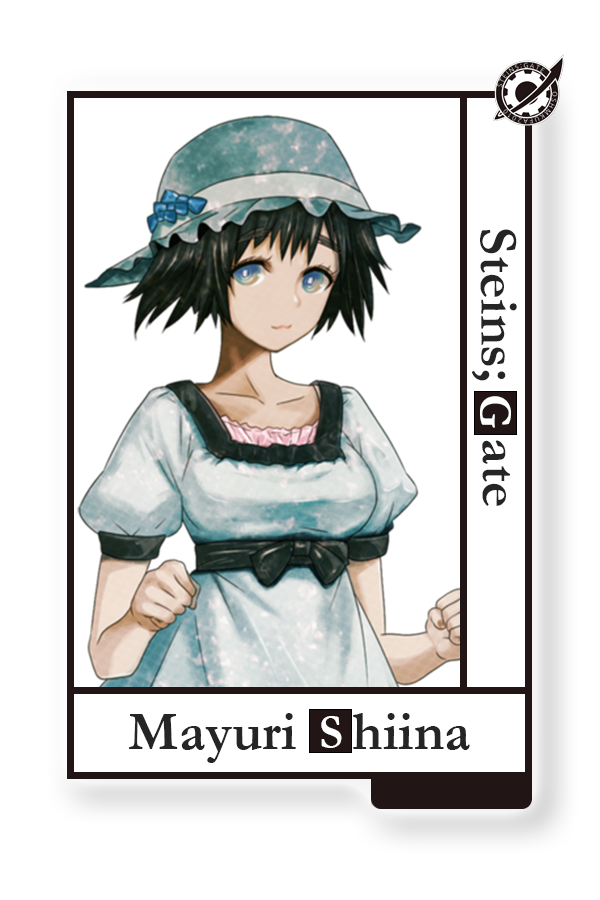
<style>
.page{position:relative;width:600px;height:900px;background:#ffffff}
.page>*{position:absolute;margin:0}
.t1{font:55.4px "Garamond-Bold";color:#252525}
.t2{font:47px "Garamond-Bold";color:#ffffff}
</style>
<div class="page">
<p class="t1" style="left:472px;top:229px;width:45px;height:277px;rotate:89deg">Steins;    ate</p>
<p class="t2" style="left:480px;top:396px;width:31px;height:32px;rotate:90deg">G</p>
<p class="t1" style="left:129px;top:713px;width:341px;height:50px">Mayuri    hiina</p>
<p class="t2" style="left:321px;top:716px;width:21px;height:32px">S</p>
</div>
